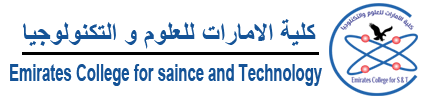
<style>
.page{position:relative;width:423px;height:102px;background:#ffffff}
.page>*{position:absolute;margin:0}
.t1{font:26.9px "Arial-BoldMT";color:#145397}
.t2{font:24.2px "Arial-BoldMT";color:#145397;scale:0.61 1}
</style>
<div class="page">
<p class="t1" style="left:23px;top:19px;width:293px;height:30px">كلية الامارات للعلوم و التكنولوجيا</p>
<p class="t2" style="left:10px;top:64px;width:312px;height:22px">Emirates College for saince and Technology</p>
</div>
